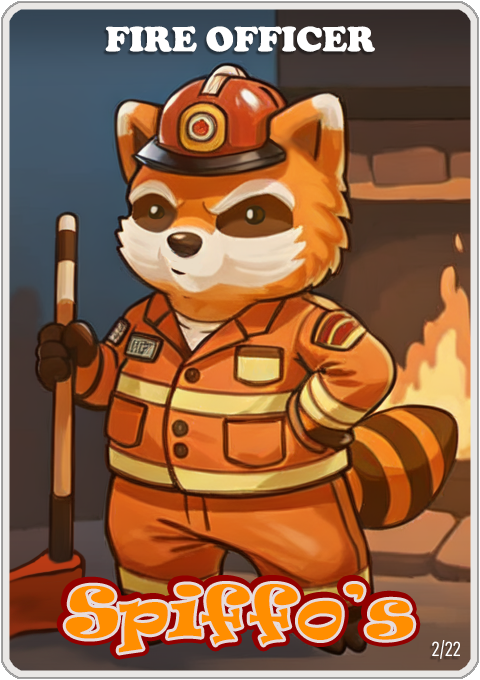
<style>
.page{position:relative;width:480px;height:680px}
.page>*{position:absolute;margin:0}
.t1{font:36px "CooperBlack";color:#ffffff}
.t2{font:65px "Ravie";color:#ff8e00}
.t3{font:20px "Bahnschrift-LightCondensed";color:#ffffff}
</style>
<div class="page">
<p class="t1" style="left:105px;top:26px;width:270px;height:26px">FIRE OFFICER</p>
<p class="t2" style="left:65px;top:584px;width:349px;height:69px">Spiffo’s</p>
<p class="t3" style="left:432px;top:640px;width:28px;height:19px">2/22</p>
</div>
